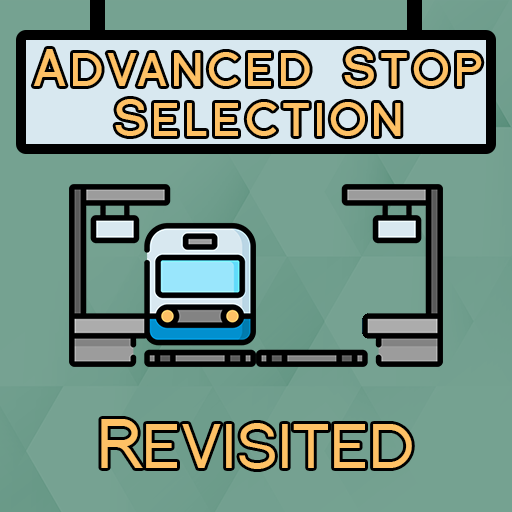
<style>
.page{position:relative;width:512px;height:512px}
.page>*{position:absolute;margin:0}
.t1{font:50px/50px "FlorencesansSC-Bold";letter-spacing:0.08em;color:#fec165}
.t2{font:70px "FlorencesansSC";color:#fec165}
</style>
<div class="page">
<p class="t1" style="left:33px;top:49px;width:449px;height:87px;text-align:center">Advanced Stop<br>Selection</p>
<p class="t2" style="left:101px;top:419px;width:311px;height:50px">Revisited</p>
</div>
